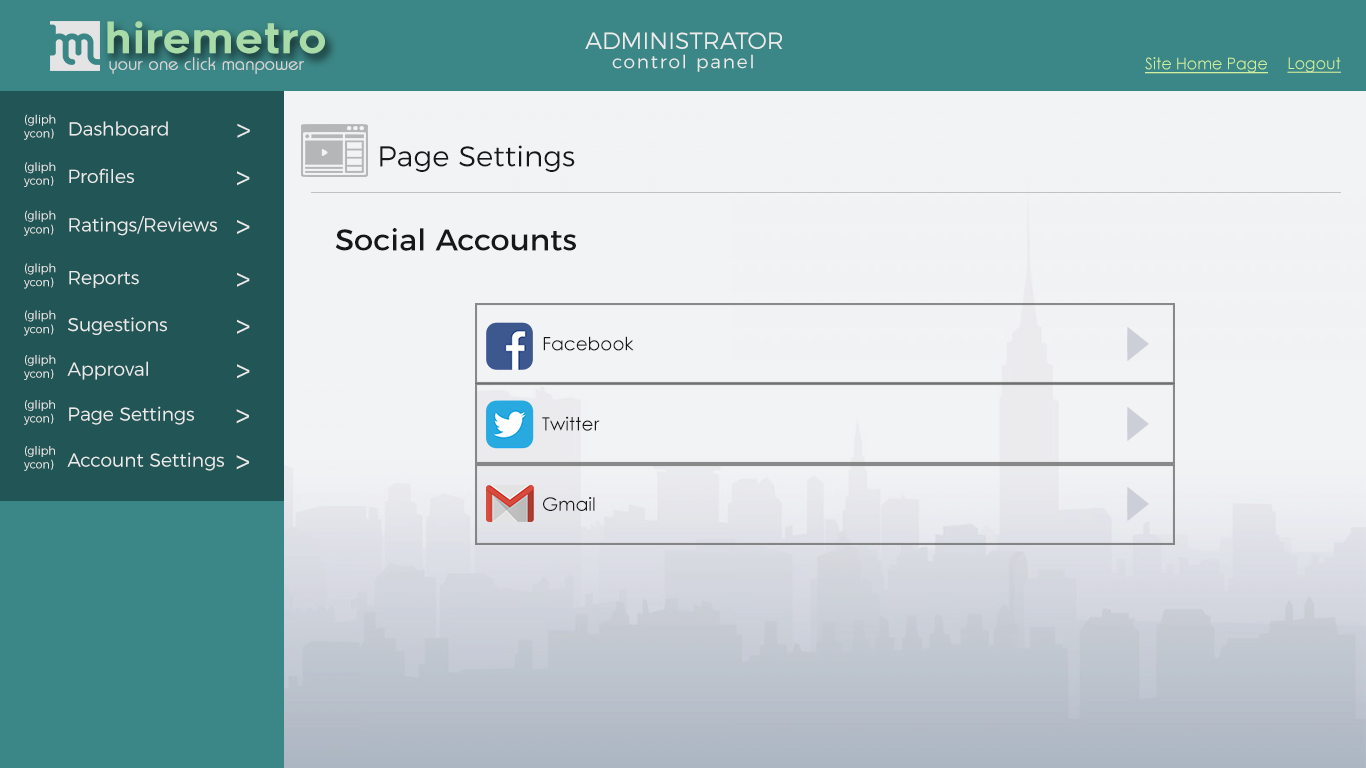
<style>
.page{position:relative;width:1366px;height:768px;background:#f2f3f5}
.page>*{position:absolute;margin:0}
.t1{font:42.1px "Renogare-Regular";color:#a8dba8}
.t2{font:23.6px "Montserrat-Light";color:#ebebeb}
.t3{font:18.4px "Montserrat-Light";letter-spacing:0.1em;color:#ebebeb}
.t4{font:17.5px "Brie-Light";color:#d5d5d5;font-weight:bold}
.t5{font:16.1px "CenturyGothic";color:#cff09e;text-decoration:underline}
.t6{font:11.5px "Montserrat-Light";color:#ebebeb}
.t7{font:18.9px "Montserrat-Light";color:#ebebeb}
.t8{font:31.2px "Montserrat-Light";color:#ebebeb}
.t9{font:28.9px "Montserrat-Light";color:#171717}
.t10{font:30px "Montserrat-Regular";color:#171717}
.t11{font:18.6px "CenturyGothic";color:#171717}
.t12{font:11.6px "Montserrat-Light";color:#ebebeb}
.t13{font:19.1px "Montserrat-Light";color:#ebebeb}
.t14{font:31.1px "Montserrat-Light";color:#ebebeb}
</style>
<div class="page">
<p class="t1" style="left:107px;top:21px;width:218px;height:33px">hiremetro</p>
<p class="t2" style="left:585px;top:32px;width:198px;height:17px">ADMINISTRATOR</p>
<p class="t3" style="left:612px;top:54px;width:141px;height:18px">control panel</p>
<p class="t4" style="left:109px;top:57px;width:195px;height:17px">your one click manpower</p>
<p class="t5" style="left:1145px;top:57px;width:123px;height:17px">Site Home Page</p>
<p class="t5" style="left:1287px;top:57px;width:54px;height:16px">Logout</p>
<p class="t6" style="left:24px;top:114px;width:32px;height:26px">(gliph<br>ycon)</p>
<p class="t7" style="left:69px;top:121px;width:99px;height:15px">Dashboard</p>
<p class="t8" style="left:237px;top:123px;width:13px;height:15px;rotate:90deg">^</p>
<p class="t9" style="left:380px;top:145px;width:195px;height:27px">Page Settings</p>
<p class="t6" style="left:24px;top:162px;width:32px;height:25px">(gliph<br>ycon)</p>
<p class="t7" style="left:69px;top:168px;width:65px;height:15px">Profiles</p>
<p class="t8" style="left:237px;top:171px;width:13px;height:15px;rotate:90deg">^</p>
<p class="t6" style="left:24px;top:210px;width:32px;height:26px">(gliph<br>ycon)</p>
<p class="t7" style="left:69px;top:216px;width:148px;height:20px">Ratings/Reviews</p>
<p class="t8" style="left:237px;top:220px;width:13px;height:14px;rotate:90deg">^</p>
<p class="t10" style="left:335px;top:228px;width:241px;height:23px">Social Accounts</p>
<p class="t6" style="left:24px;top:263px;width:32px;height:26px">(gliph<br>ycon)</p>
<p class="t7" style="left:69px;top:271px;width:70px;height:17px">Reports</p>
<p class="t8" style="left:237px;top:272px;width:13px;height:15px;rotate:90deg">^</p>
<p class="t6" style="left:24px;top:310px;width:32px;height:26px">(gliph<br>ycon)</p>
<p class="t7" style="left:68px;top:317px;width:99px;height:18px">Sugestions</p>
<p class="t8" style="left:237px;top:319px;width:13px;height:15px;rotate:90deg">^</p>
<p class="t11" style="left:543px;top:336px;width:91px;height:15px">Facebook</p>
<p class="t6" style="left:24px;top:355px;width:32px;height:25px">(gliph<br>ycon)</p>
<p class="t7" style="left:67px;top:361px;width:81px;height:19px">Approval</p>
<p class="t8" style="left:237px;top:364px;width:13px;height:15px;rotate:90deg">^</p>
<p class="t12" style="left:24px;top:400px;width:31px;height:25px">(gliph<br>ycon)</p>
<p class="t13" style="left:69px;top:406px;width:125px;height:19px">Page Settings</p>
<p class="t14" style="left:236px;top:409px;width:13px;height:15px;rotate:90deg">^</p>
<p class="t11" style="left:542px;top:416px;width:58px;height:15px">Twitter</p>
<p class="t12" style="left:24px;top:446px;width:31px;height:25px">(gliph<br>ycon)</p>
<p class="t13" style="left:67px;top:452px;width:157px;height:19px">Account Settings</p>
<p class="t14" style="left:236px;top:455px;width:13px;height:15px;rotate:90deg">^</p>
<p class="t11" style="left:543px;top:497px;width:52px;height:14px">Gmail</p>
</div>
